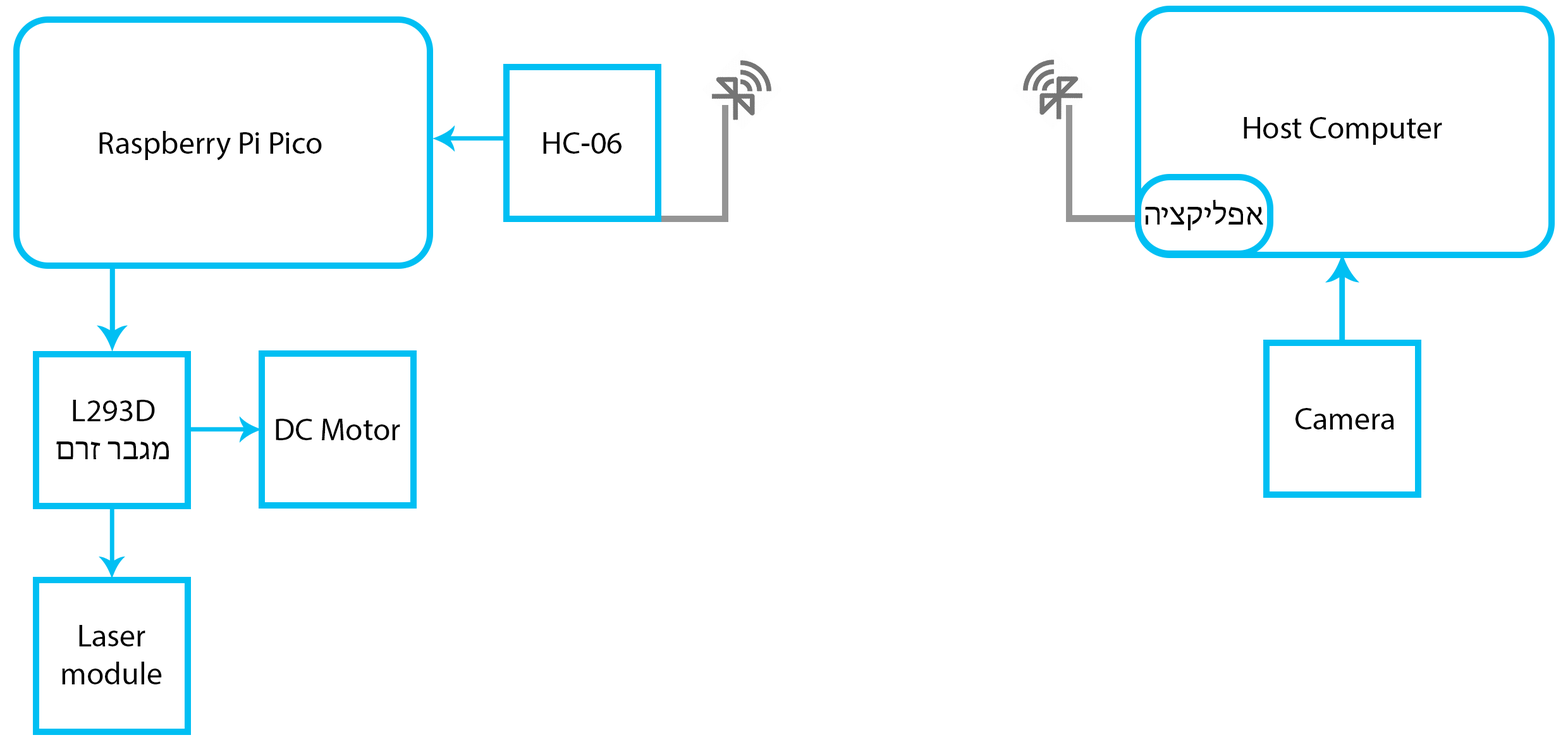
<style>
.page{position:relative;width:1568px;height:747px;background:#ffffff}
.page>*{position:absolute;margin:0}
.t1{font:31.6px "MyriadHebrew-Regular";color:#000000}
</style>
<div class="page">
<p class="t1" style="left:1244px;top:117px;width:198px;height:28px">Host Computer</p>
<p class="t1" style="left:99px;top:131px;width:223px;height:30px">Raspberry Pi Pico</p>
<p class="t1" style="left:543px;top:132px;width:79px;height:22px">HC-06</p>
<p class="t1" style="left:1145px;top:199px;width:118px;height:32px">אפליקציה</p>
<p class="t1" style="left:56px;top:400px;width:113px;height:59px;text-align:center">L293D<br>מגבר זרם</p>
<p class="t1" style="left:1295px;top:408px;width:99px;height:21px">Camera</p>
<p class="t1" style="left:276px;top:419px;width:124px;height:21px">DC Motor</p>
<p class="t1" style="left:62px;top:625px;width:100px;height:59px;text-align:center">Laser<br>module</p>
</div>
